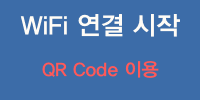
<style>
.page{position:relative;width:200px;height:100px;background:#3c6ca8}
.page>*{position:absolute;margin:0}
.t1{font:25.6px "YDIYGO340";letter-spacing:-0.006em;color:#fffcf6}
.t2{font:18.7px "YDIYGO340";letter-spacing:-0.006em;color:#ff5959}
</style>
<div class="page">
<p class="t1" style="left:20px;top:14px;width:160px;height:23px">WiFi 연결 시작</p>
<p class="t2" style="left:42px;top:61px;width:117px;height:17px">QR Code 이용</p>
</div>
